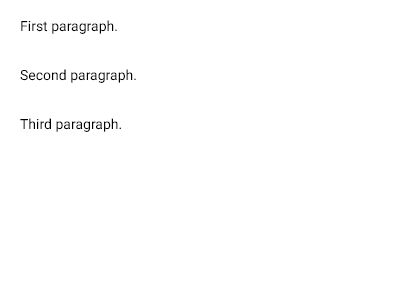
<style>
.page{position:relative;width:400px;height:300px;background:#ffffff}
.page>*{position:absolute;margin:0}
.t1{font:14px "Roboto-Regular";color:#000000}
</style>
<div class="page">
<p class="t1" style="left:20px;top:20px;width:116px;height:112px">First paragraph.<br><br>Second paragraph.<br><br>Third paragraph.</p>
</div>
